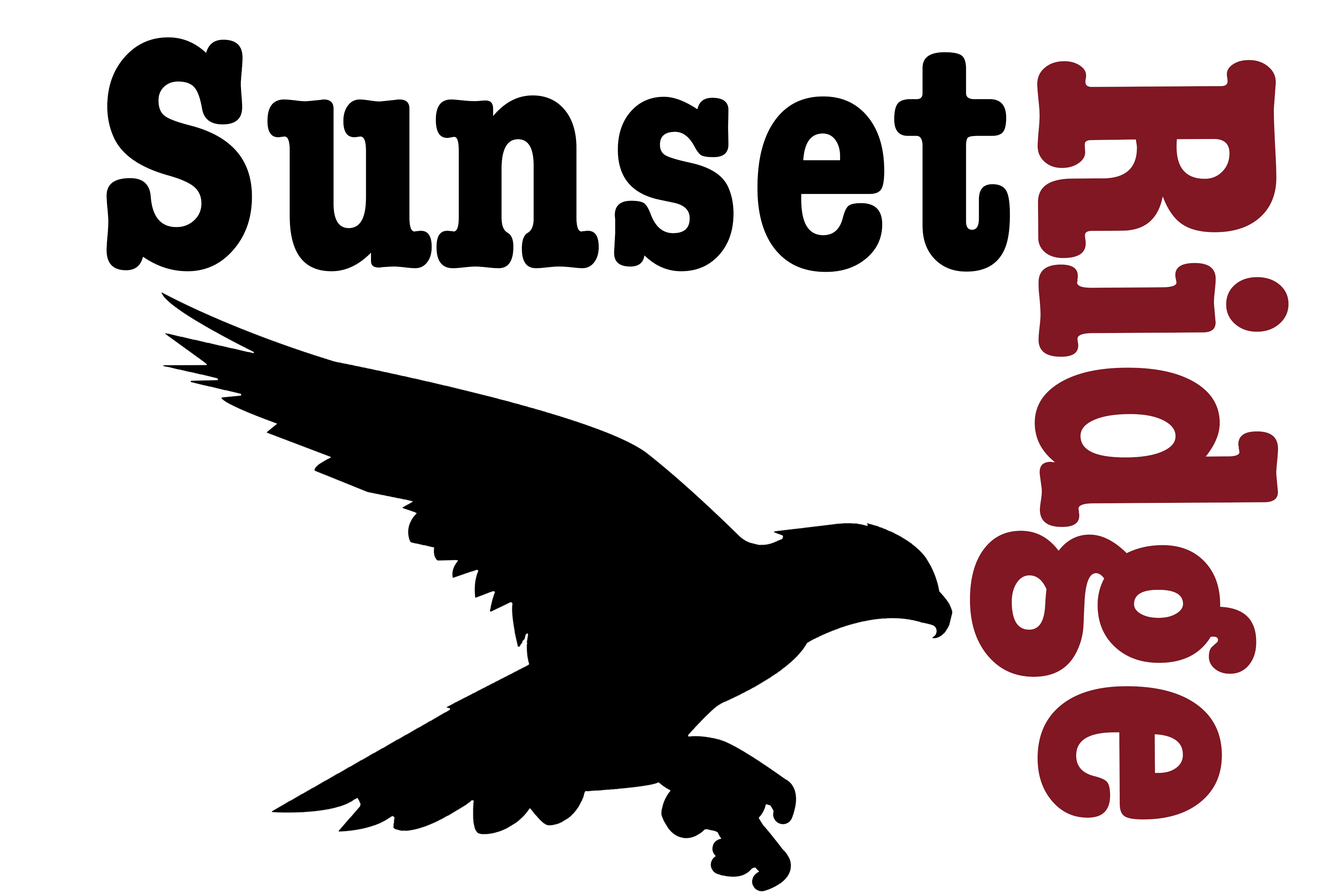
<style>
.page{position:relative;width:1337px;height:892px;background:#ffffff}
.page>*{position:absolute;margin:0}
.t1{font:337.4px "AmericanTypewriter-CondensedBold";letter-spacing:0.02em;color:#000000}
.t2{font:354.5px "AmericanTypewriter-CondensedBold";color:#801723}
</style>
<div class="page">
<p class="t1" style="left:106px;top:37px;width:904px;height:235px">Sunset</p>
<p class="t2" style="left:970px;top:60px;width:319px;height:759px;rotate:90deg">Ridge</p>
</div>
